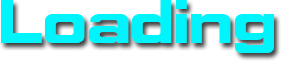
<style>
.page{position:relative;width:281px;height:61px;background:#ffffff}
.page>*{position:absolute;margin:0}
.t1{font:60px "Grammara-Normal";letter-spacing:-0.02em;color:#00f4fb}
</style>
<div class="page">
<p class="t1" style="left:1px;top:0px;width:273px;height:53px">Loading</p>
</div>
